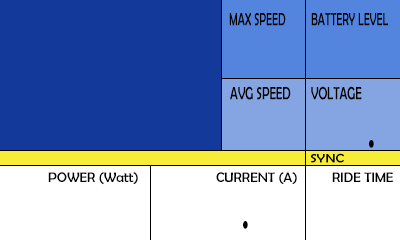
<style>
.page{position:relative;width:400px;height:240px;background:#13399b}
.page>*{position:absolute;margin:0}
.t1{font:18px "BerlinSansFB-Reg";color:#000000;scale:0.61 1}
.t2{font:18px "BerlinSansFB-Reg";color:#000000;scale:0.66 1}
.t3{font:48px "BerlinSansFB-Reg";color:#000000;scale:0.66 1}
.t4{font:12.4px "BerlinSansFB-Reg";color:#000000;scale:1.16 1}
.t5{font:14px "BerlinSansFB-Reg";color:#000000}
</style>
<div class="page">
<p class="t1" style="left:229px;top:13px;width:57px;height:13px">MAX SPEED</p>
<p class="t1" style="left:311px;top:13px;width:77px;height:13px">BATTERY LEVEL</p>
<p class="t2" style="left:230px;top:86px;width:61px;height:14px">AVG SPEED</p>
<p class="t2" style="left:311px;top:86px;width:51px;height:14px">VOLTAGE</p>
<p class="t3" style="left:369px;top:140px;width:5px;height:8px">.</p>
<p class="t4" style="left:311px;top:153px;width:33px;height:10px">SYNC</p>
<p class="t5" style="left:48px;top:172px;width:90px;height:13px">POWER (Watt)</p>
<p class="t5" style="left:216px;top:172px;width:81px;height:13px">CURRENT (A)</p>
<p class="t5" style="left:332px;top:172px;width:61px;height:10px">RIDE TIME</p>
<p class="t3" style="left:243px;top:221px;width:5px;height:8px">.</p>
</div>
